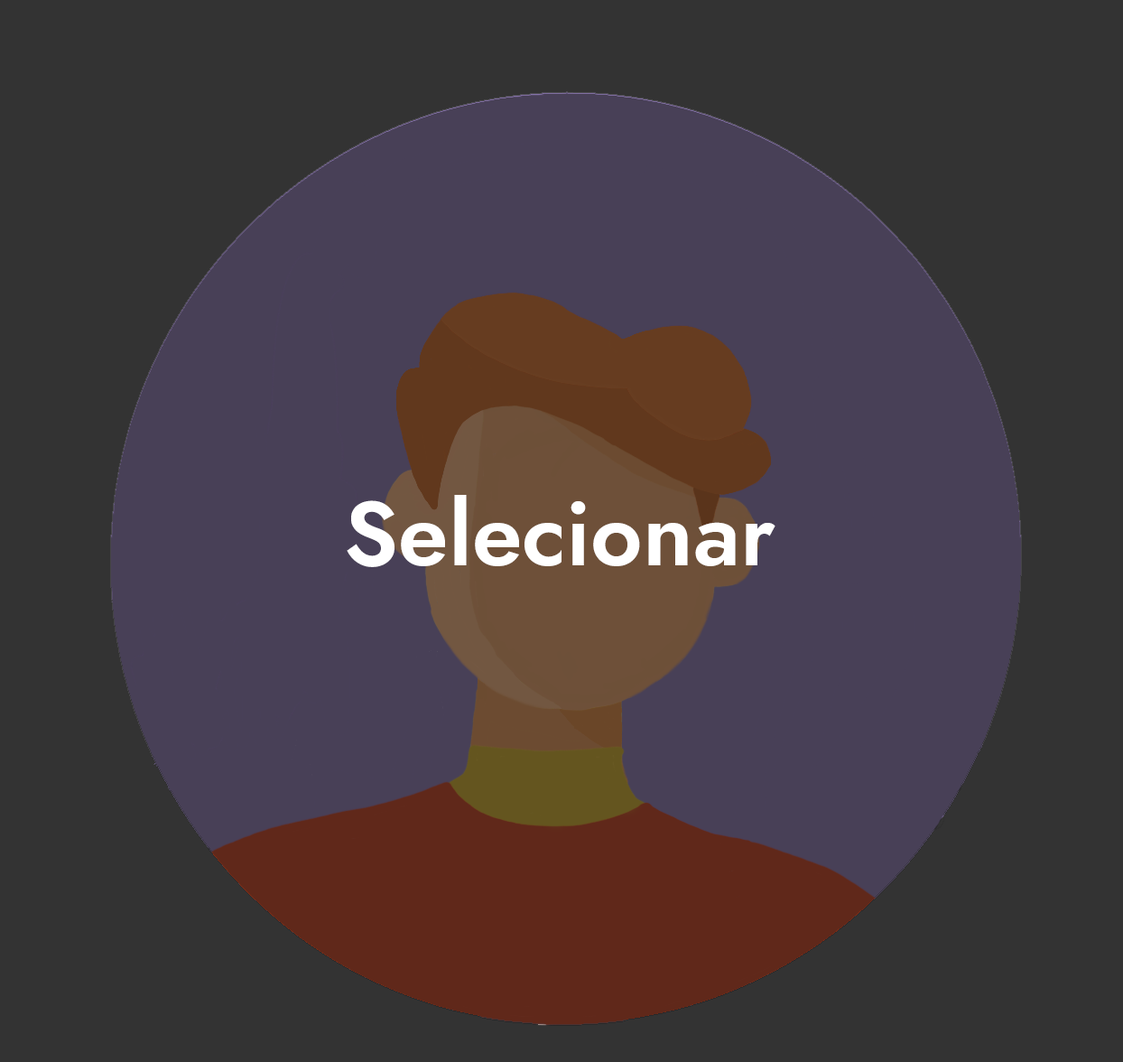
<style>
.page{position:relative;width:1123px;height:1062px;background:#333333}
.page>*{position:absolute;margin:0}
.t1{font:90.3px "Jost-SemiBold";color:#ffffff}
</style>
<div class="page">
<p class="t1" style="left:347px;top:495px;width:429px;height:72px">Selecionar</p>
</div>
